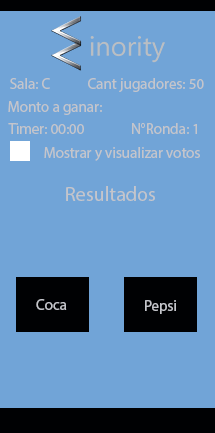
<style>
.page{position:relative;width:215px;height:433px;background:#71a4d7}
.page>*{position:absolute;margin:0}
.t1{font:15px "MyriadPro-Regular";color:#c4c5cb}
.t2{font:20px "MyriadPro-Regular";color:#c4c5cb}
</style>
<div class="page">
<p class="t1" style="left:10px;top:78px;width:40px;height:11px">Sala: C</p>
<p class="t1" style="left:88px;top:78px;width:116px;height:14px">Cant jugadores: 50</p>
<p class="t1" style="left:8px;top:101px;width:94px;height:14px">Monto a ganar:</p>
<p class="t1" style="left:8px;top:123px;width:76px;height:11px">Timer: 00:00</p>
<p class="t1" style="left:132px;top:123px;width:65px;height:11px">N°Ronda: 1</p>
<p class="t1" style="left:44px;top:147px;width:156px;height:14px">Mostrar y visualizar votos</p>
<p class="t2" style="left:66px;top:186px;width:89px;height:15px">Resultados</p>
<p class="t1" style="left:36px;top:299px;width:31px;height:11px">Coca</p>
<p class="t1" style="left:145px;top:300px;width:31px;height:14px">Pepsi</p>
</div>
